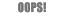
<style>
.page{position:relative;width:64px;height:16px;background:#ffffff}
.page>*{position:absolute;margin:0}
.t1{font:12px "Impact";color:#757575}
</style>
<div class="page">
<p class="t1" style="left:18px;top:2px;width:28px;height:11px">OOPS!</p>
</div>
